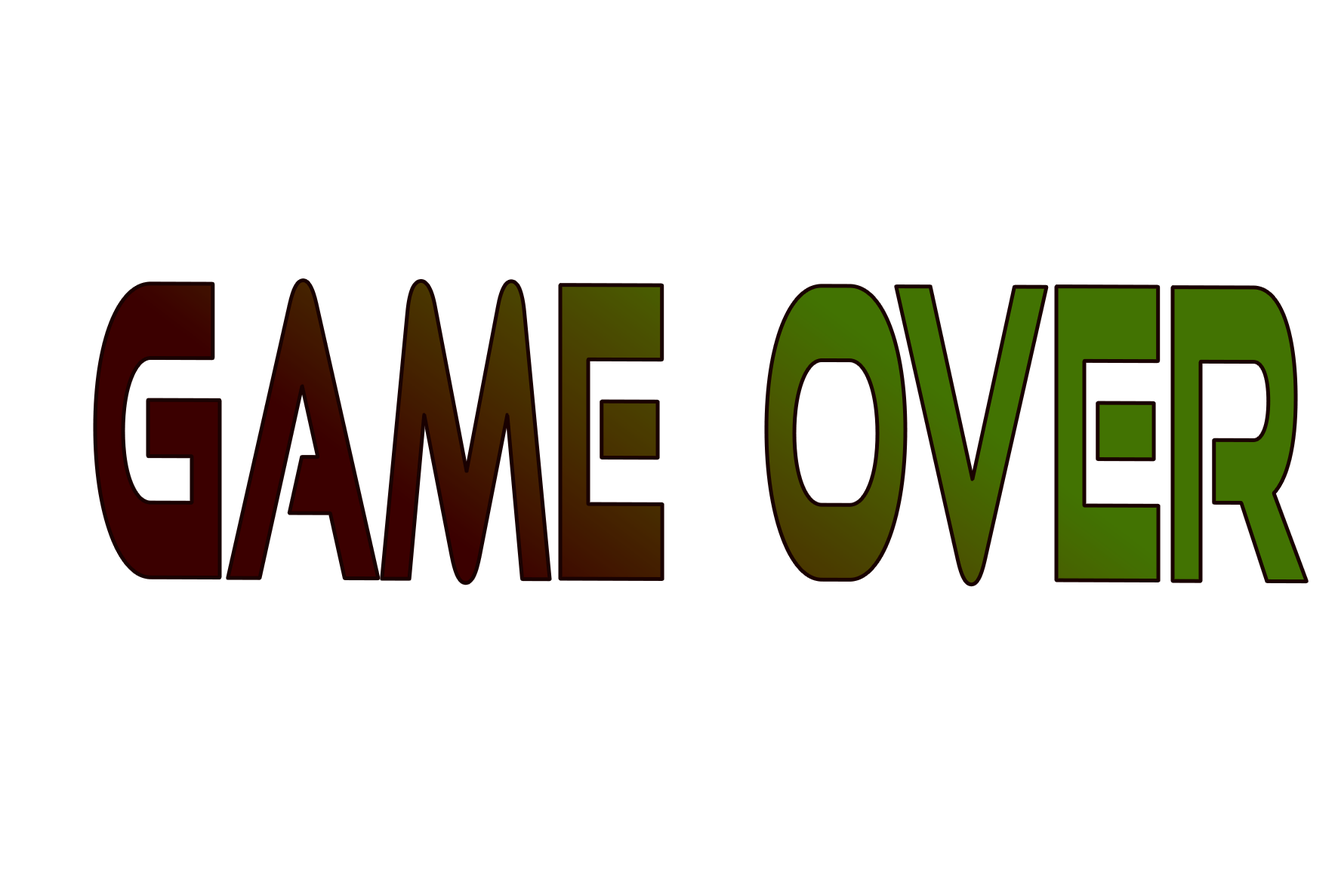
<style>
.page{position:relative;width:1338px;height:891px;background:#ffffff}
.page>*{position:absolute;margin:0}
.t1{font:404.3px "GoodTimesHv-Regular";letter-spacing:0.005em;scale:0.37 1}
</style>
<div class="page">
<p class="t1" style="left:95px;top:280px;width:1212px;height:305px">GAME  OVER</p>
</div>
